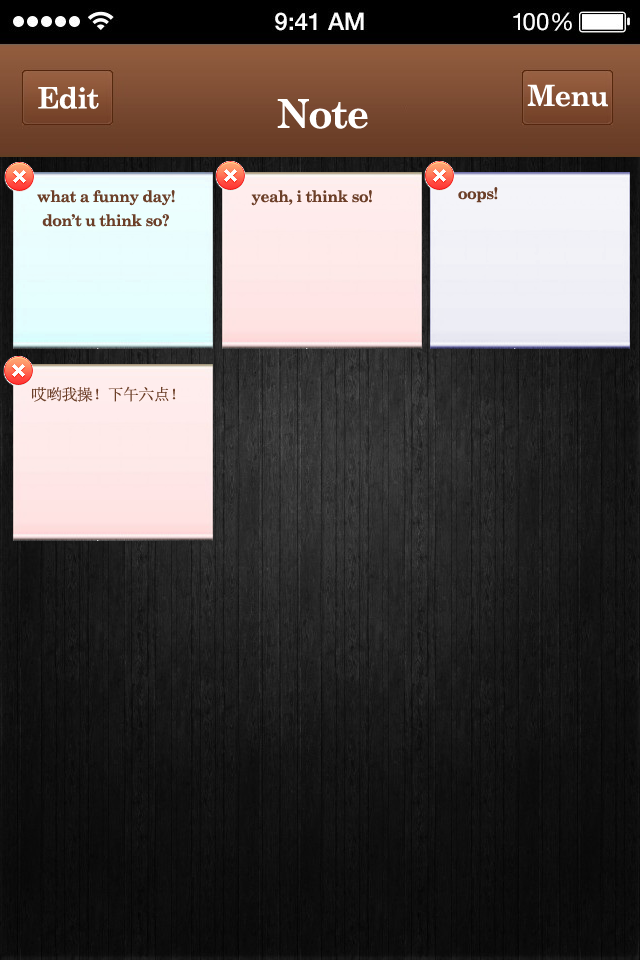
<style>
.page{position:relative;width:640px;height:960px}
.page>*{position:absolute;margin:0}
.t1{font:29.3px "CenturySchoolbook-Bold";letter-spacing:-0.04em;color:#ffffff}
.t2{font:40px "CenturySchoolbook-Bold";letter-spacing:-0.04em;color:#ffffff}
.t3{font:16px/24px "CenturySchoolbook-Bold";letter-spacing:-0.04em;color:#6c3f28}
.t4{font:16px "CenturySchoolbook-Bold";letter-spacing:-0.04em;color:#6c3f28}
.t5{font:16px "SimSun";letter-spacing:-0.04em;color:#6c3f28}
</style>
<div class="page">
<p class="t1" style="left:38px;top:86px;width:61px;height:23px">Edit</p>
<p class="t1" style="left:527px;top:84px;width:81px;height:23px">Menu</p>
<p class="t2" style="left:277px;top:99px;width:91px;height:30px">Note</p>
<p class="t3" style="left:37px;top:190px;width:138px;height:37px;text-align:center">what a funny day!<br>don’t u think so?</p>
<p class="t4" style="left:251px;top:190px;width:121px;height:16px">yeah, i think so!</p>
<p class="t4" style="left:458px;top:187px;width:40px;height:16px">oops!</p>
<p class="t5" style="left:32px;top:386px;width:144px;height:16px">哎哟我操！下午六点！</p>
</div>
